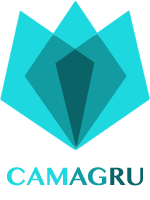
<style>
.page{position:relative;width:150px;height:200px;background:#ffffff}
.page>*{position:absolute;margin:0}
.t1{font:29.2px "KhmerMN-Bold";color:#1dd8df}
.t2{font:29.2px "KhmerMN-Bold";color:#129ca1}
.t3{font:29.2px "KhmerMN-Bold";color:#0a6366}
</style>
<div class="page">
<p class="t1" style="left:7px;top:167px;width:136px;height:19px">CAM<span class="t2">AG</span><span class="t3">RU</span></p>
</div>
